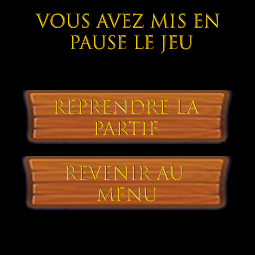
<style>
.page{position:relative;width:255px;height:255px;background:#000000}
.page>*{position:absolute;margin:0}
.t1{font:17.9px "TrajanColor-Concept"}
</style>
<div class="page">
<p class="t1" style="left:35px;top:13px;width:185px;height:41px;text-align:center">Vous avez mis en <br>pause le jeu</p>
<p class="t1" style="left:54px;top:99px;width:147px;height:36px;text-align:center">Reprendre la<br>partie</p>
<p class="t1" style="left:66px;top:165px;width:118px;height:37px;text-align:center">Revenir au <br>menu</p>
</div>
